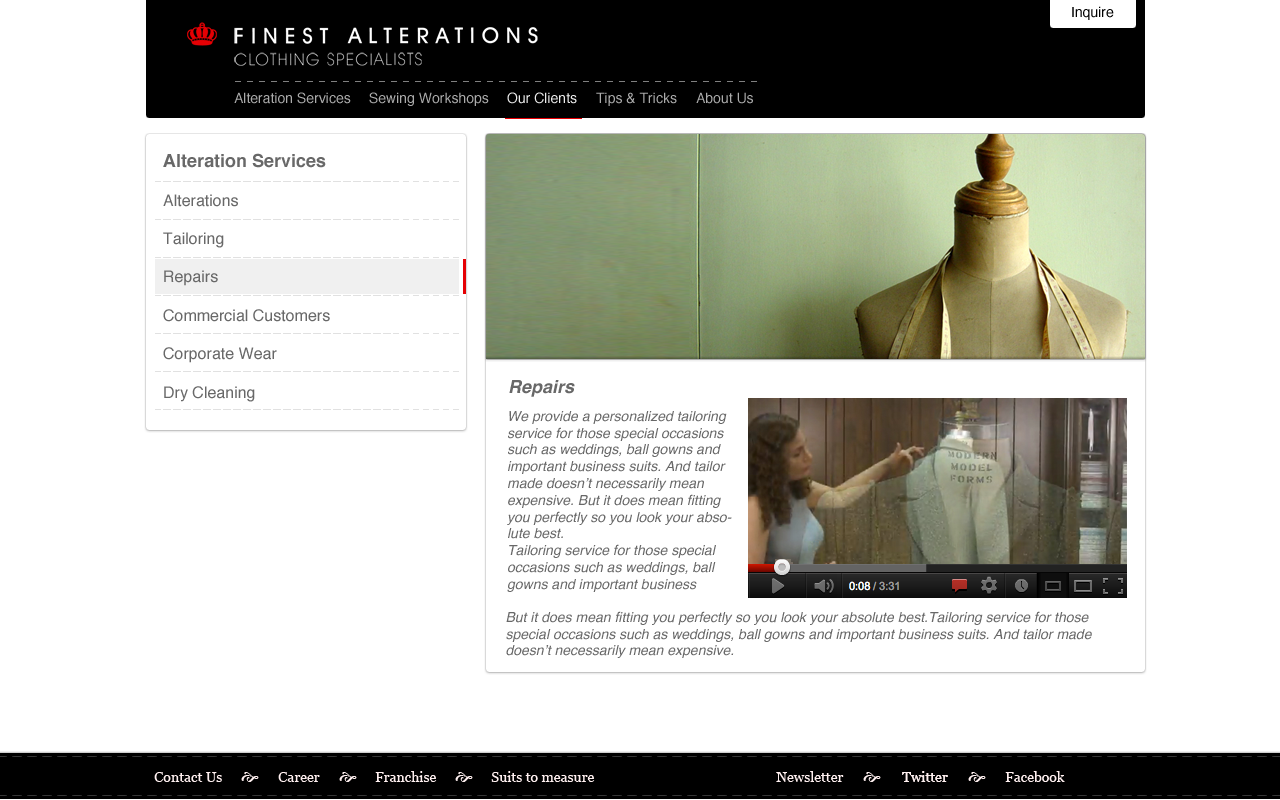
<style>
.page{position:relative;width:1280px;height:800px;background:#ffffff}
.page>*{position:absolute;margin:0}
.t1{font:14px "Helvetica";color:#000000}
.t2{font:18px "Helvetica-Bold";color:#686868}
.t3{font:16px "Helvetica";color:#686868}
.t4{font:18px "Helvetica-BoldOblique";color:#686868}
.t5{font:14px "Helvetica-Oblique";color:#686868}
.t6{font:14px "Georgia";color:#fff0f0}
</style>
<div class="page">
<p class="t1" style="left:1072px;top:6px;width:42px;height:14px">Inquire</p>
<p class="t2" style="left:163px;top:153px;width:163px;height:15px">Alteration Services</p>
<p class="t3" style="left:163px;top:194px;width:167px;height:208px">Alterations<br><br>Tailoring<br><br>Repairs<br><br>Commercial Customers<br><br>Corporate Wear<br><br>Dry Cleaning</p>
<p class="t4" style="left:509px;top:380px;width:66px;height:17px">Repairs</p>
<p class="t5" style="left:507px;top:411px;width:225px;height:181px">We provide a personalized tailoring service for those special occasions such as weddings, ball gowns and important business suits. And tailor made doesn’t necessarily mean expensive. But it does mean fitting you perfectly so you look your absolute best.<br>Tailoring service for those special occasions such as weddings, ball gowns and important business suits. And tailor made doesn’t necessarily mean expensive.</p>
<p class="t5" style="left:506px;top:611px;width:586px;height:47px">But it does mean fitting you perfectly so you look your absolute best.Tailoring service for those special occasions such as weddings, ball gowns and important business suits. And tailor made doesn’t necessarily mean expensive.</p>
<p class="t6" style="left:154px;top:772px;width:68px;height:10px">Contact Us</p>
<p class="t6" style="left:278px;top:772px;width:42px;height:10px">Career</p>
<p class="t6" style="left:375px;top:771px;width:62px;height:11px">Franchise</p>
<p class="t6" style="left:491px;top:771px;width:104px;height:11px">Suits to measure</p>
<p class="t6" style="left:776px;top:771px;width:68px;height:11px">Newsletter</p>
<p class="t6" style="left:902px;top:771px;width:46px;height:11px">Twitter</p>
<p class="t6" style="left:902px;top:771px;width:46px;height:11px">Twitter</p>
<p class="t6" style="left:1005px;top:771px;width:60px;height:11px">Facebook</p>
</div>
